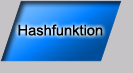
<style>
.page{position:relative;width:133px;height:73px;background:#c6c3c6}
.page>*{position:absolute;margin:0}
.t1{font:14.7px "ArialMT";color:#000000}
</style>
<div class="page">
<p class="t1" style="left:18px;top:24px;width:85px;height:12px">Hashfunktion</p>
</div>
